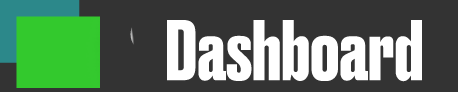
<style>
.page{position:relative;width:458px;height:92px;background:#333333}
.page>*{position:absolute;margin:0}
.t1{font:80.9px "DrukCyr-Bold";color:#ffffff;scale:1.05 1}
</style>
<div class="page">
<p class="t1" style="left:167px;top:20px;width:255px;height:62px">Dashboard</p>
</div>
